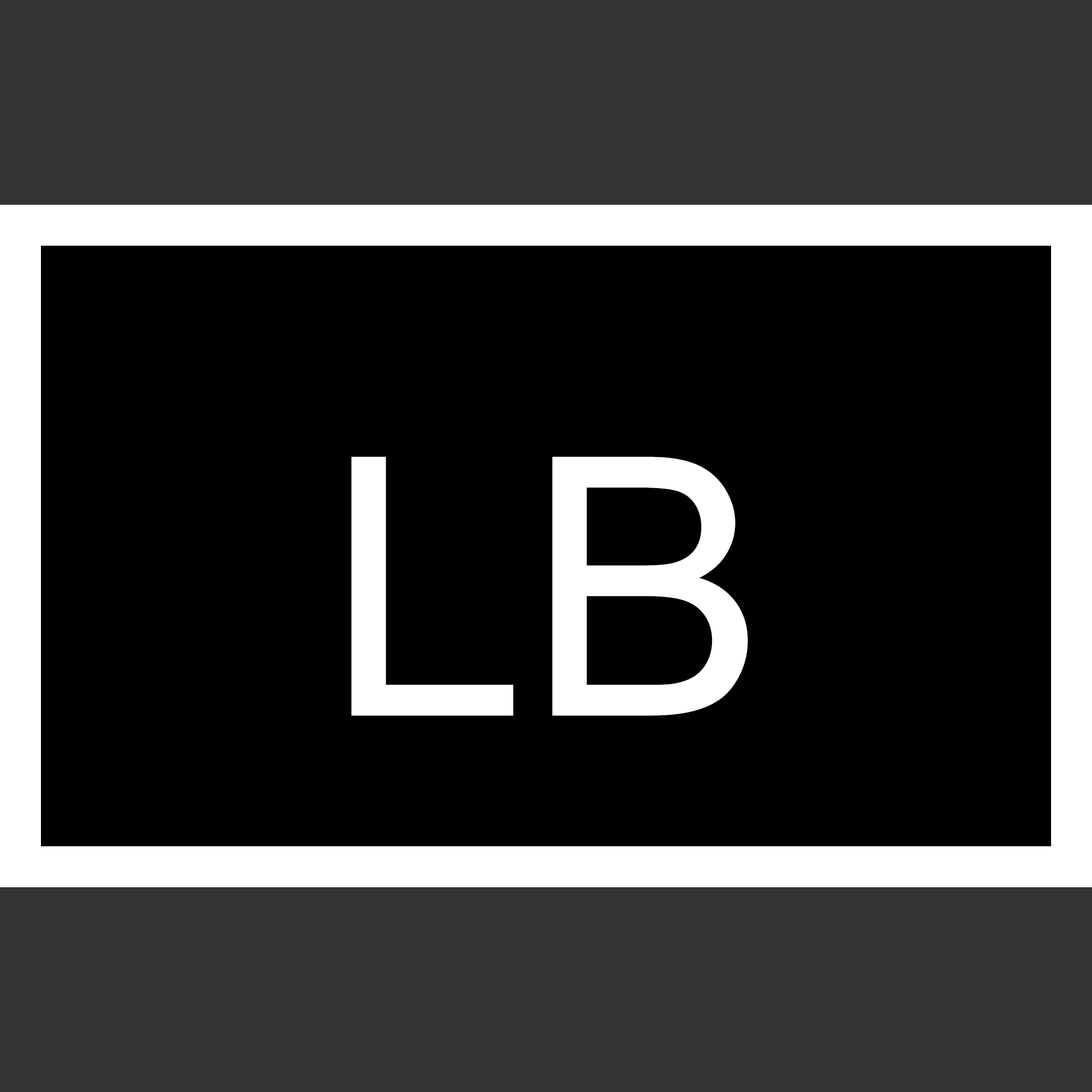
<style>
.page{position:relative;width:1092px;height:1092px;background:#000000}
.page>*{position:absolute;margin:0}
.t1{font:361.1px "ArialMT";color:#ffffff}
</style>
<div class="page">
<p class="t1" style="left:351px;top:456px;width:397px;height:260px">LB</p>
</div>
